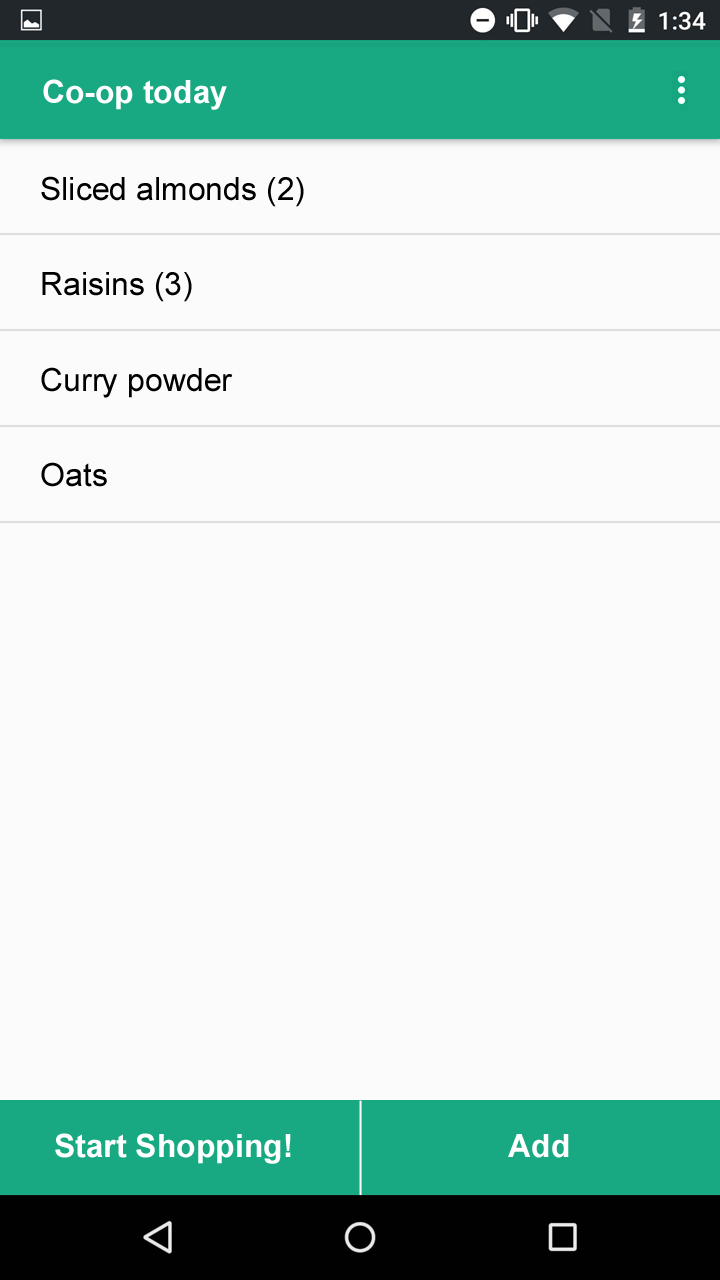
<style>
.page{position:relative;width:720px;height:1280px;background:#fbfbfb}
.page>*{position:absolute;margin:0}
.t1{font:32px "Arial-BoldMT";color:#ffffff}
.t2{font:32px "ArialMT";color:#000000}
</style>
<div class="page">
<p class="t1" style="left:43px;top:79px;width:184px;height:31px">Co-op today</p>
<p class="t2" style="left:41px;top:176px;width:263px;height:31px">Sliced almonds (2)</p>
<p class="t2" style="left:42px;top:272px;width:150px;height:30px">Raisins (3)</p>
<p class="t2" style="left:41px;top:367px;width:192px;height:31px">Curry powder</p>
<p class="t2" style="left:41px;top:462px;width:66px;height:25px">Oats</p>
<p class="t1" style="left:55px;top:1133px;width:236px;height:31px">Start Shopping!</p>
<p class="t1" style="left:508px;top:1134px;width:61px;height:24px">Add</p>
</div>
